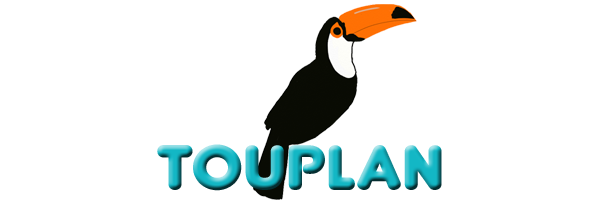
<style>
.page{position:relative;width:600px;height:200px;background:#ffffff}
.page>*{position:absolute;margin:0}
.t1{font:75px "Junegull";scale:1.06 1}
</style>
<div class="page">
<p class="t1" style="left:157px;top:144px;width:285px;height:47px">TOUPLAN</p>
</div>
